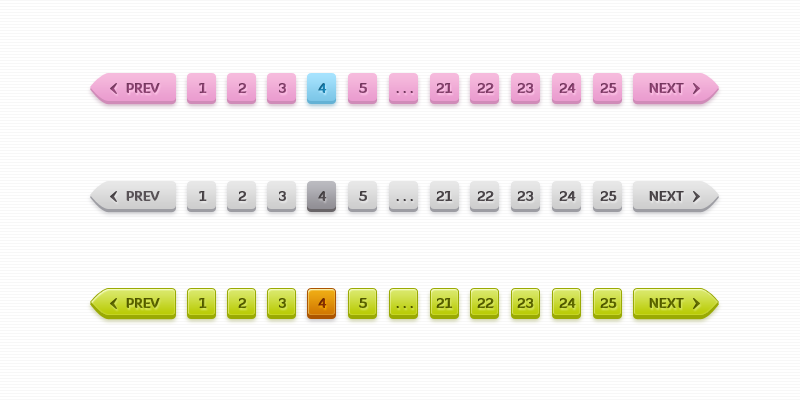
<style>
.page{position:relative;width:800px;height:400px;background:#ffffff}
.page>*{position:absolute;margin:0}
.t1{font:13px "DiavloBlack-Regular";color:#86416d;text-transform:uppercase}
.t2{font:13px "DiavloBlack-Regular"}
.t3{font:13px "DiavloBlack-Regular";color:#823e69}
.t4{font:13px "DiavloBlack-Regular";color:#84406c}
.t5{font:13px "DiavloBlack-Regular";color:#1880b0}
.t6{font:13px "DiavloBlack-Regular";color:#813e69}
.t7{font:13px "DiavloBlack-Regular";color:#833f6a}
.t8{font:13px "DiavloBlack-Regular";color:#87416e}
.t9{font:13px "DiavloBlack-Regular";color:#87426e;text-transform:uppercase}
.t10{font:13px "DiavloBlack-Regular";color:#70365b}
.t11{font:13px "DiavloBlack-Regular";color:#585256;text-transform:uppercase}
.t12{font:13px "DiavloBlack-Regular";color:#585256}
.t13{font:13px "DiavloBlack-Regular";color:#3f3a3d}
.t14{font:13px "DiavloBlack-Regular";color:#687300;text-transform:uppercase}
.t15{font:13px "DiavloBlack-Regular";color:#687300}
.t16{font:13px "DiavloBlack-Regular";color:#555f00}
.t17{font:13px "DiavloBlack-Regular";color:#923400}
.t18{font:13px "DiavloBlack-Regular";color:#4a5200}
</style>
<div class="page">
<p class="t1" style="left:126px;top:83px;width:34px;height:10px">Prev</p>
<p class="t2" style="left:199px;top:83px;width:8px;height:10px">1</p>
<p class="t3" style="left:238px;top:83px;width:9px;height:10px">2</p>
<p class="t4" style="left:279px;top:83px;width:7px;height:10px">3</p>
<p class="t5" style="left:318px;top:83px;width:9px;height:10px">4</p>
<p class="t6" style="left:359px;top:83px;width:8px;height:10px">5</p>
<p class="t7" style="left:436px;top:83px;width:17px;height:10px">21</p>
<p class="t6" style="left:477px;top:83px;width:17px;height:10px">22</p>
<p class="t7" style="left:517px;top:83px;width:17px;height:10px">23</p>
<p class="t8" style="left:559px;top:83px;width:17px;height:10px">24</p>
<p class="t7" style="left:600px;top:83px;width:17px;height:10px">25</p>
<p class="t9" style="left:649px;top:83px;width:35px;height:10px">next</p>
<p class="t10" style="left:396px;top:91px;width:17px;height:2px">. . .</p>
<p class="t11" style="left:126px;top:191px;width:34px;height:10px">Prev</p>
<p class="t12" style="left:199px;top:191px;width:8px;height:10px">1</p>
<p class="t12" style="left:238px;top:191px;width:9px;height:10px">2</p>
<p class="t12" style="left:279px;top:191px;width:7px;height:10px">3</p>
<p class="t12" style="left:318px;top:191px;width:9px;height:10px">4</p>
<p class="t12" style="left:359px;top:191px;width:8px;height:10px">5</p>
<p class="t12" style="left:436px;top:191px;width:17px;height:10px">21</p>
<p class="t12" style="left:477px;top:191px;width:17px;height:10px">22</p>
<p class="t12" style="left:517px;top:191px;width:17px;height:10px">23</p>
<p class="t12" style="left:559px;top:191px;width:17px;height:10px">24</p>
<p class="t12" style="left:600px;top:191px;width:17px;height:10px">25</p>
<p class="t11" style="left:649px;top:191px;width:35px;height:10px">next</p>
<p class="t13" style="left:396px;top:199px;width:17px;height:2px">. . .</p>
<p class="t14" style="left:126px;top:298px;width:34px;height:10px">Prev</p>
<p class="t15" style="left:199px;top:298px;width:8px;height:10px">1</p>
<p class="t16" style="left:238px;top:298px;width:9px;height:10px">2</p>
<p class="t15" style="left:279px;top:298px;width:7px;height:10px">3</p>
<p class="t17" style="left:318px;top:298px;width:9px;height:10px">4</p>
<p class="t15" style="left:359px;top:298px;width:8px;height:10px">5</p>
<p class="t15" style="left:436px;top:298px;width:17px;height:10px">21</p>
<p class="t15" style="left:477px;top:298px;width:17px;height:10px">22</p>
<p class="t15" style="left:517px;top:298px;width:17px;height:10px">23</p>
<p class="t15" style="left:559px;top:298px;width:17px;height:10px">24</p>
<p class="t15" style="left:600px;top:298px;width:17px;height:10px">25</p>
<p class="t14" style="left:649px;top:298px;width:35px;height:10px">next</p>
<p class="t18" style="left:396px;top:306px;width:17px;height:2px">. . .</p>
</div>
